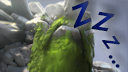
<style>
.page{position:relative;width:128px;height:72px}
.page>*{position:absolute;margin:0}
.t1{font:30.6px "MyriadPro-BoldIt";scale:1.22 1}
.t2{font:27.1px "MyriadPro-BoldIt";scale:1.19 1}
.t3{font:19.6px "MyriadPro-BoldIt";color:#011356;scale:1.09 1}
.t4{font:19.6px "MyriadPro-BoldIt";color:#010f48;scale:1.09 1}
</style>
<div class="page">
<p class="t1" style="left:72px;top:0px;width:20px;height:29px;rotate:-22deg">Z</p>
<p class="t2" style="left:91px;top:11px;width:24px;height:21px;rotate:9deg">Z</p>
<p class="t3" style="left:101px;top:35px;width:20px;height:15px;rotate:54deg">Z</p>
<p class="t4" style="left:108px;top:55px;width:12px;height:13px;rotate:54deg">...</p>
</div>
